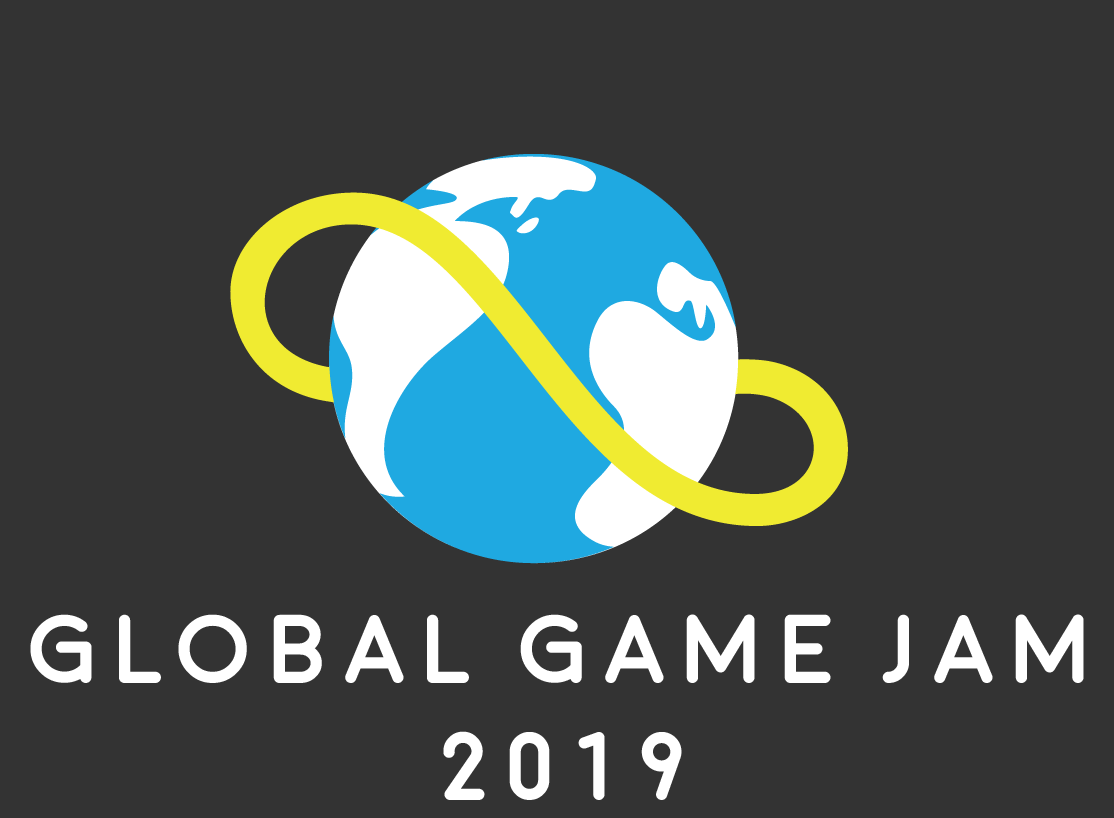
<style>
.page{position:relative;width:1114px;height:818px;background:#333333}
.page>*{position:absolute;margin:0}
.t1{font:97.6px "Moon-Bold";letter-spacing:0.1em;color:#ffffff}
</style>
<div class="page">
<p class="t1" style="left:30px;top:614px;width:1054px;height:186px;text-align:center">Global game jam<br>2019</p>
</div>
